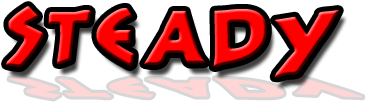
<style>
.page{position:relative;width:367px;height:103px;background:#ffffff}
.page>*{position:absolute;margin:0}
.t1{font:120px "300Trojans"}
</style>
<div class="page">
<p class="t1" style="left:6px;top:6px;width:333px;height:72px">s  t  e     a     d    y</p>
</div>
